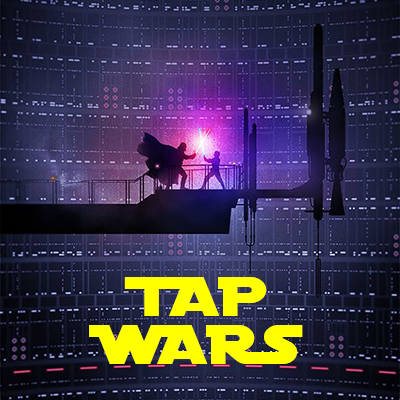
<style>
.page{position:relative;width:400px;height:400px}
.page>*{position:absolute;margin:0}
.t1{font:60px/48px "DistantGalaxy";color:#ffff00;scale:1.2 1}
</style>
<div class="page">
<p class="t1" style="left:89px;top:277px;width:214px;height:87px;text-align:center">TAP<br>WARS</p>
</div>
